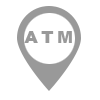
<style>
.page{position:relative;width:100px;height:100px;background:#ffffff}
.page>*{position:absolute;margin:0}
.t1{font:17.3px "Arial-Black";letter-spacing:0.185em;color:#999999}
</style>
<div class="page">
<p class="t1" style="left:24px;top:31px;width:48px;height:12px">ATM</p>
</div>
